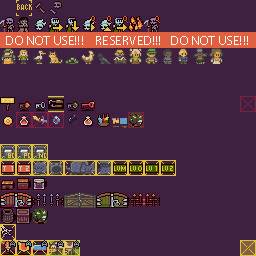
<style>
.page{position:relative;width:256px;height:256px;background:#402040}
.page>*{position:absolute;margin:0}
.t1{font:13.3px "MyriadPro-Regular";color:#ffffff}
</style>
<div class="page">
<p class="t1" style="left:6px;top:36px;width:242px;height:9px">DO NOT USE!!!    RESERVED!!!   DO NOT USE!!!</p>
</div>
